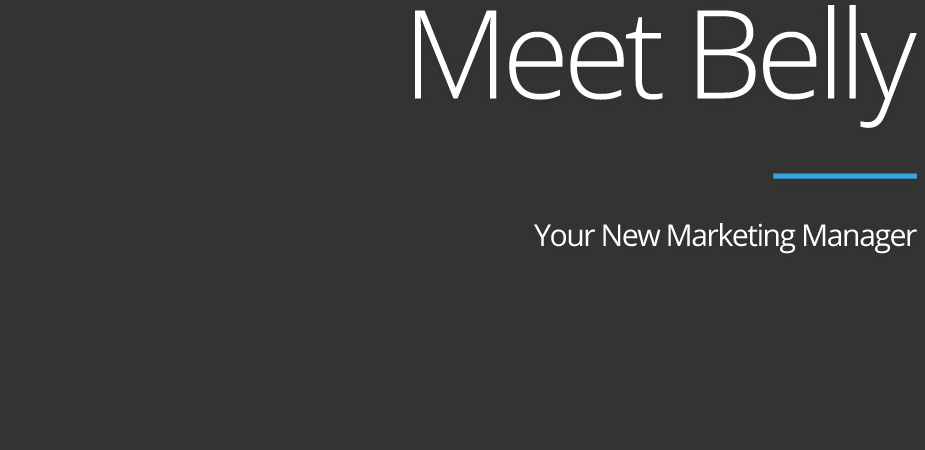
<style>
.page{position:relative;width:925px;height:450px;background:#333333}
.page>*{position:absolute;margin:0}
.t1{font:122.6px "OpenSans-Light";letter-spacing:-0.05em;color:#ffffff}
.t2{font:30.2px "OpenSans";letter-spacing:-0.05em;color:#ffffff}
</style>
<div class="page">
<p class="t1" style="left:415px;top:5px;width:502px;height:123px">Meet Belly</p>
<p class="t2" style="left:534px;top:223px;width:383px;height:31px">Your New Marketing Manager</p>
</div>
